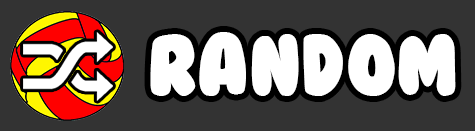
<style>
.page{position:relative;width:475px;height:131px;background:#333333}
.page>*{position:absolute;margin:0}
.t1{font:80px "BubbleGum";color:#ffffff}
</style>
<div class="page">
<p class="t1" style="left:150px;top:32px;width:306px;height:64px">Random</p>
</div>
